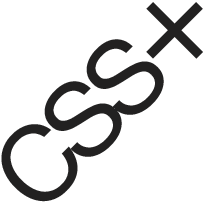
<style>
.page{position:relative;width:204px;height:204px;background:#ffffff}
.page>*{position:absolute;margin:0}
.t1{font:105px "HelveticaNeue";letter-spacing:-0.08em;color:#222121}
.t2{font:140px "HelveticaNeue";letter-spacing:-0.08em;color:#222121}
</style>
<div class="page">
<p class="t1" style="left:1px;top:2px;width:202px;height:200px;rotate:-45deg">CSS<span class="t2">+</span></p>
</div>
